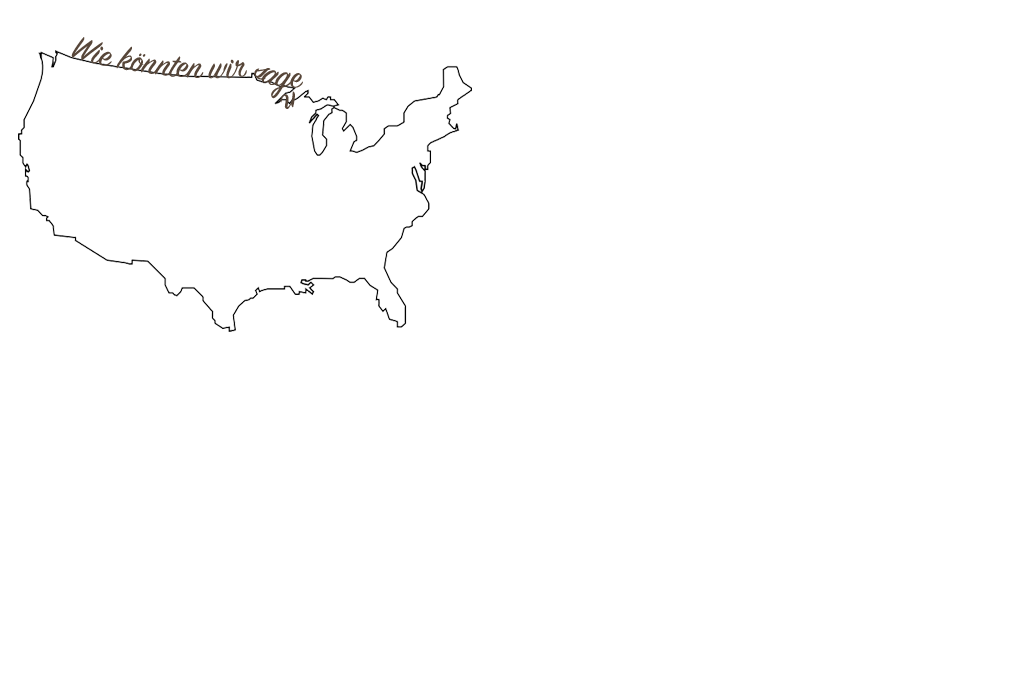
<style>
.page{position:relative;width:1034px;height:673px;background:#ffffff}
.page>*{position:absolute;margin:0}
.t1{font:36px "SignPainter-HouseScript";color:#574639}
</style>
<div class="page">
<p class="t1" style="left:71px;top:37px;width:232px;height:72px">Wie könnten wir sagen</p>
</div>
